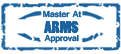
<style>
.page{position:relative;width:121px;height:54px;background:#ffffff}
.page>*{position:absolute;margin:0}
.t1{font:9px "Shruti-Bold";color:#1b639e}
.t2{font:16px "PoplarStd";color:#1b639e}
</style>
<div class="page">
<p class="t1" style="left:43px;top:10px;width:39px;height:8px">Master At</p>
<p class="t1" style="left:43px;top:10px;width:39px;height:8px">Master At</p>
<p class="t2" style="left:44px;top:21px;width:35px;height:12px">ARMS</p>
<p class="t2" style="left:44px;top:21px;width:35px;height:12px">ARMS</p>
<p class="t1" style="left:44px;top:34px;width:35px;height:9px">Approval</p>
<p class="t1" style="left:44px;top:34px;width:35px;height:9px">Approval</p>
</div>
